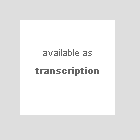
<style>
.page{position:relative;width:140px;height:140px;background:#dedede}
.page>*{position:absolute;margin:0}
.t1{font:9px/18px "ArialMT";color:#666666;font-weight:bold}
.t2{font:9px/18px "ArialMT";color:#666666}
</style>
<div class="page">
<p class="t1" style="left:35px;top:49px;width:64px;height:27px;text-align:center"><span class="t2">available as<br></span>transcription</p>
</div>
